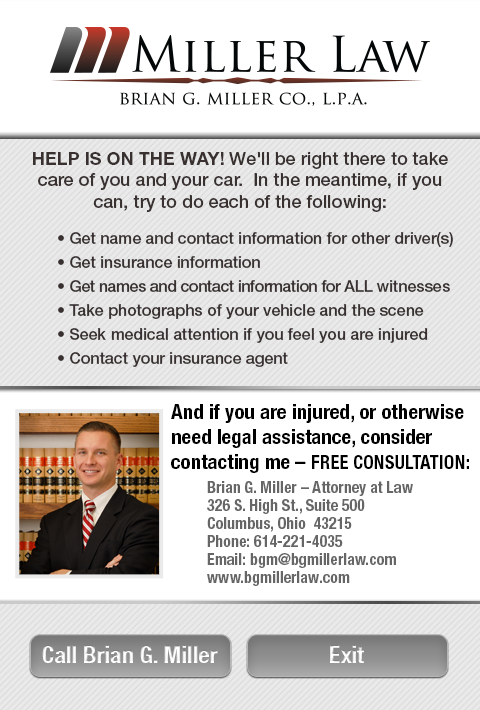
<style>
.page{position:relative;width:480px;height:710px;background:#ffffff}
.page>*{position:absolute;margin:0}
.t1{font:16px/24px "HelveticaNeueLTStd-Md";color:#393030}
.t2{font:18px "HelveticaNeueLTStd-Bd";color:#393030;text-transform:uppercase}
.t3{font:18px "HelveticaNeueLTStd-Md";color:#393030}
.t4{font:16px/30px "HelveticaNeueLTStd-Md";color:#393030}
.t5{font:16px/24px "HelveticaNeueLTStd-Md";letter-spacing:-0.025em;color:#393030}
.t6{font:16px/24px "HelveticaNeueLTStd-Md";letter-spacing:-0.025em;color:#393030;text-transform:uppercase}
.t7{font:16px/18px "HelveticaNeueLTStd-BdCn";color:#666666}
.t8{font:21px "HelveticaNeueLTStd-BdCn";color:#000000}
.t9{font:19px "HelveticaNeueLTStd-BdCn";color:#000000}
.t10{font:16px/24px "HelveticaNeueLTStd-BdCn";color:#666666}
.t11{font:24px "HelveticaNeueLTStd-BdCn";color:#f1f2f2}
.t12{font:24px "HelveticaNeueLTStd-BdCn";color:#efefef}
</style>
<div class="page">
<p class="t1" style="left:33px;top:152px;width:420px;height:215px;text-align:center"><span class="t2">Help is on the way! </span><span class="t3">We'll be right there to take care of you and your car.  In the meantime, if you can, try to do each of the following:<br><br></span><span class="t4"> • Get name and contact information for other driver(s)<br></span> • Get insurance information<br> • <span class="t5">Get names and contact information for </span><span class="t6">all</span> witnesses<br> • Take photographs of your vehicle and the scene<br> • Seek medical attention if you feel you are injured<br> • Contact your insurance agent</p>
<p class="t7" style="left:171px;top:404px;width:298px;height:182px"><span class="t8">And if you are injured, or otherwise need legal assistance, consider contacting me – </span><span class="t9">FREE CONSULTATION:<br></span><span class="t10"> Brian G. Miller – Attorney at Law<br></span> 326 S. High St., Suite 500<br> Columbus, Ohio  43215<br> Phone: 614-221-4035<br> Email: bgm@bgmillerlaw.com<br> www.bgmillerlaw.com</p>
<p class="t11" style="left:42px;top:645px;width:176px;height:18px">Call Brian G. Miller</p>
<p class="t12" style="left:330px;top:645px;width:34px;height:18px">Exit</p>
</div>
